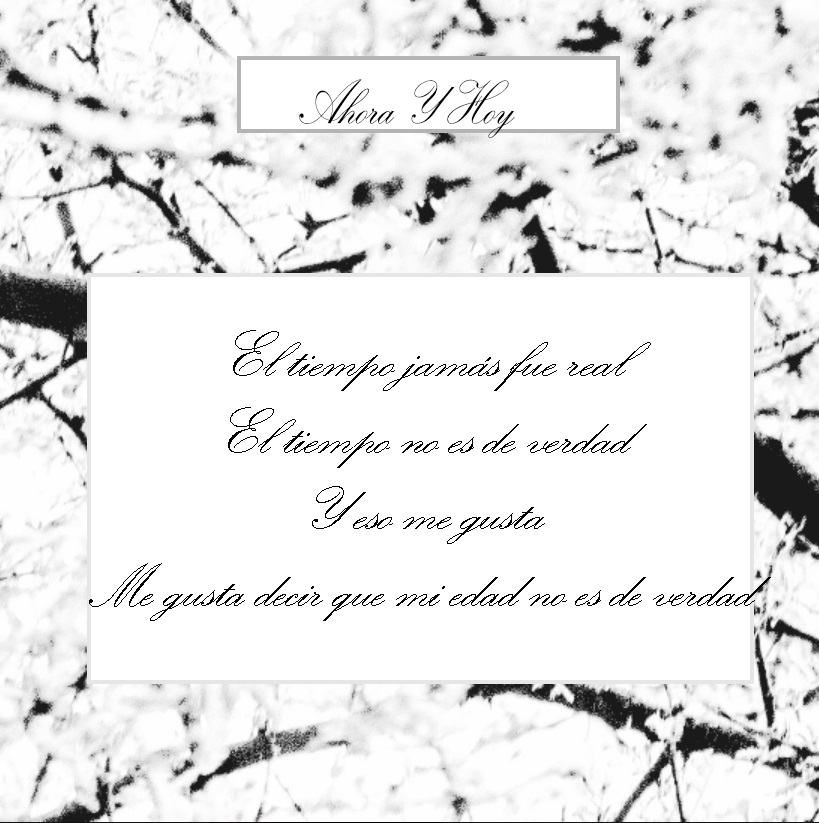
<style>
.page{position:relative;width:819px;height:823px;background:#ffffff}
.page>*{position:absolute;margin:0}
.t1{font:64px "KunstlerScript";color:#030303;scale:0.79 1}
.t2{font:64px "KunstlerScript";color:#030303}
.t3{font:57.3px "KunstlerScript";color:#030303}
</style>
<div class="page">
<p class="t1" style="left:299px;top:79px;width:216px;height:59px">Ahora Y Hoy</p>
<p class="t2" style="left:89px;top:330px;width:682px;height:291px;text-align:center"><span class="t3"><br></span>El tiempo jamás fue real<br>El tiempo no es de verdad<br>Y eso me gusta<br>Me gusta decir que mi edad no es de verdad</p>
</div>
